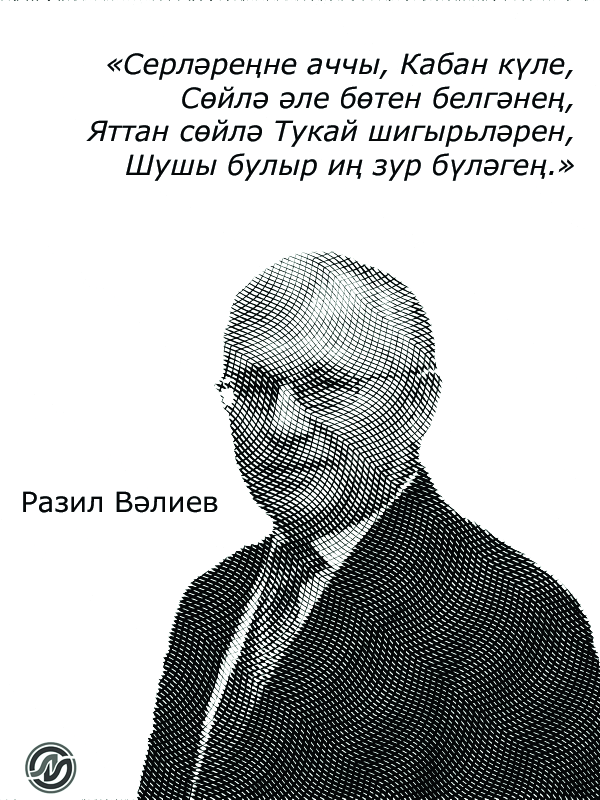
<style>
.page{position:relative;width:600px;height:800px;background:#ffffff}
.page>*{position:absolute;margin:0}
.t1{font:28px "Verdana-Italic";color:#050708}
.t2{font:28px "Verdana";color:#050708}
</style>
<div class="page">
<p class="t1" style="left:86px;top:52px;width:488px;height:129px;text-align:right">«Серләреңне аччы, Кабан күле,<br>Сөйлә әле бөтен белгәнең,<br>Яттан сөйлә Тукай шигырьләрен,<br>Шушы булыр иң зур бүләгең.»</p>
<p class="t2" style="left:23px;top:491px;width:195px;height:22px">Разил Вәлиев</p>
</div>
